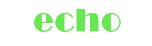
<style>
.page{position:relative;width:152px;height:46px;background:#ffffff}
.page>*{position:absolute;margin:0}
.t1{font:33.2px "Broadway";letter-spacing:0.04em;color:#66e850}
</style>
<div class="page">
<p class="t1" style="left:34px;top:9px;width:87px;height:23px">echo</p>
<p class="t1" style="left:34px;top:9px;width:87px;height:23px">echo</p>
</div>
